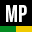
<style>
.page{position:relative;width:32px;height:32px;background:#000000}
.page>*{position:absolute;margin:0}
.t1{font:24px "BebasNeue-Regular";color:#ffffff}
</style>
<div class="page">
<p class="t1" style="left:6px;top:5px;width:21px;height:17px">mp</p>
</div>
